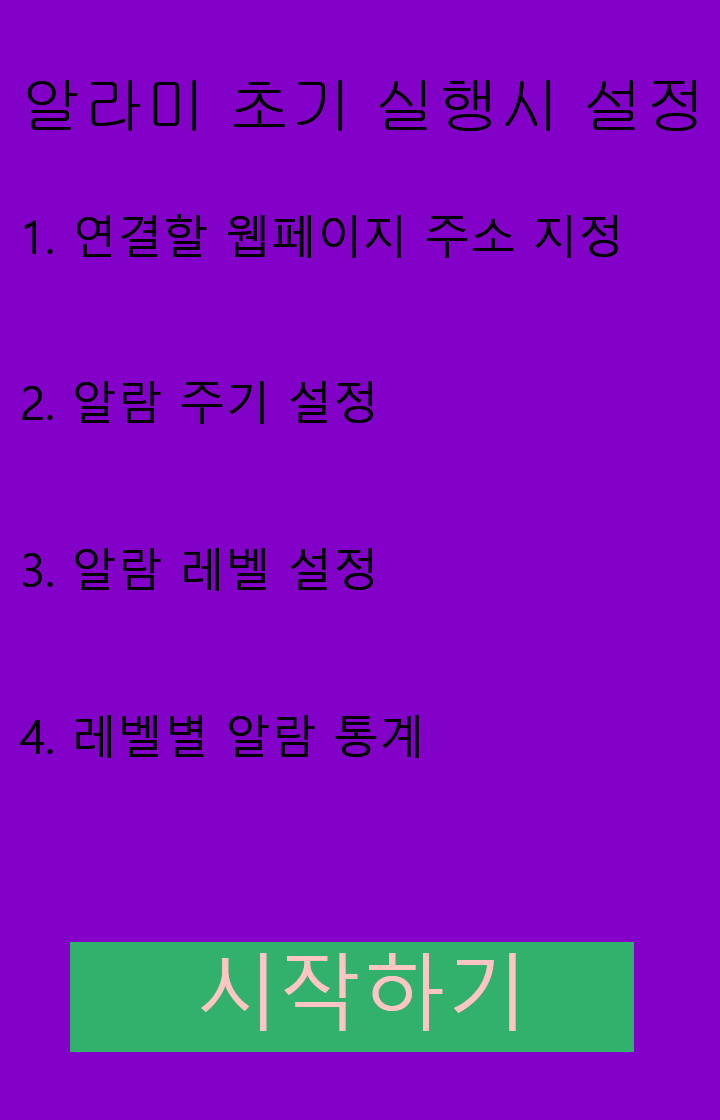
<style>
.page{position:relative;width:720px;height:1120px;background:#8300c8}
.page>*{position:absolute;margin:0}
.t1{font:62.5px "Gulim";color:#000000}
.t2{font:45.8px/166.7px "MalgunGothic";color:#000000}
.t3{font:83.3px "MalgunGothic";color:#ffc5c5}
</style>
<div class="page">
<p class="t1" style="left:27px;top:80px;width:670px;height:51px">알라미 초기 실행시 설정</p>
<p class="t2" style="left:20px;top:214px;width:598px;height:544px">1. 연결할 웹페이지 주소 지정<br>2. 알람 주기 설정 <br>3. 알람 레벨 설정<br>4. 레벨별 알람 통계</p>
<p class="t3" style="left:201px;top:953px;width:315px;height:78px">시작하기</p>
</div>
